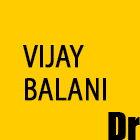
<style>
.page{position:relative;width:140px;height:140px;background:#ffcc00}
.page>*{position:absolute;margin:0}
.t1{font:32.5px/33.4px "MyriadPro-Regular";color:#000000;text-transform:uppercase;font-weight:bold;scale:0.79 1}
.t2{font:35.9px "Impact";color:#000000}
</style>
<div class="page">
<p class="t1" style="left:23px;top:45px;width:83px;height:56px">vijay<br>balani</p>
<p class="t2" style="left:108px;top:112px;width:32px;height:28px">Dr</p>
<p class="t2" style="left:108px;top:112px;width:32px;height:28px">Dr</p>
</div>
